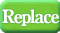
<style>
.page{position:relative;width:60px;height:33px;background:#76ca38}
.page>*{position:absolute;margin:0}
.t1{font:18px "RyuminPro-ExBold";letter-spacing:-0.08em;color:#ffffff}
</style>
<div class="page">
<p class="t1" style="left:2px;top:9px;width:57px;height:17px">Replace</p>
</div>
